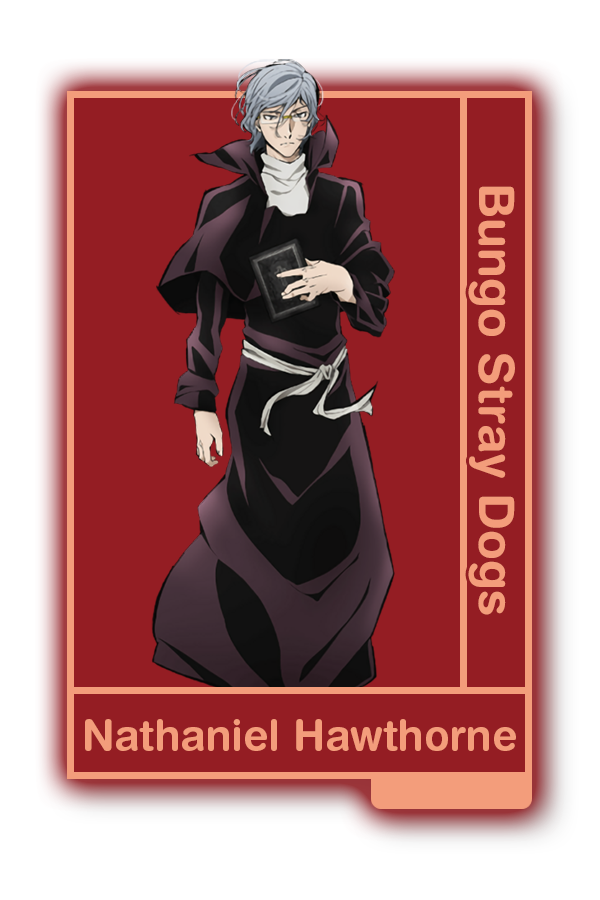
<style>
.page{position:relative;width:600px;height:900px;background:#941d23}
.page>*{position:absolute;margin:0}
.t1{font:48.8px "HelveticaRounded-Bold";color:#f39d7b}
.t2{font:41.7px "HelveticaRounded-Bold";color:#f39d7b}
</style>
<div class="page">
<p class="t1" style="left:468px;top:186px;width:47px;height:429px;rotate:90deg">Bungo Stray Dogs</p>
<p class="t2" style="left:85px;top:719px;width:431px;height:32px">Nathaniel Hawthorne</p>
</div>
